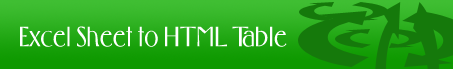
<style>
.page{position:relative;width:453px;height:69px}
.page>*{position:absolute;margin:0}
.t1{font:30px "Foster";color:#ffffff}
</style>
<div class="page">
<p class="t1" style="left:20px;top:26px;width:267px;height:21px">Excel Sheet to HTML Table</p>
</div>
